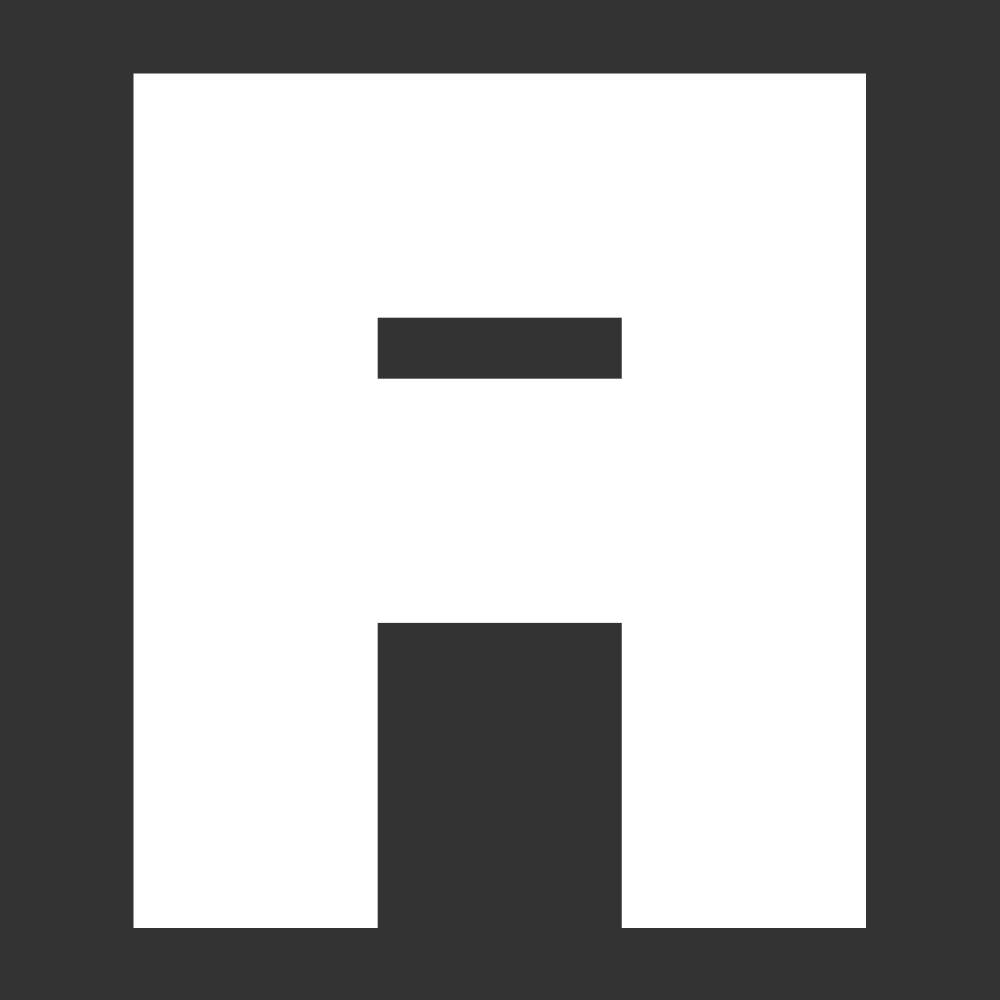
<style>
.page{position:relative;width:1000px;height:1000px;background:#ffffff}
.page>*{position:absolute;margin:0}
.t1{font:1250px "NeonOverdrive";letter-spacing:0.01em;color:#ffffff}
</style>
<div class="page">
<p class="t1" style="left:133px;top:73px;width:733px;height:855px">A</p>
</div>
